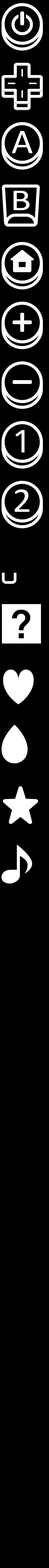
<style>
.page{position:relative;width:49px;height:1568px;background:#000000}
.page>*{position:absolute;margin:0}
.t1{font:34.9px "Calibri";color:#ffffff;scale:1.06 1}
.t2{font:30.6px "Calibri";color:#ffffff;scale:1.25 1}
.t3{font:31.3px "DroidSansMono";color:#ffffff;scale:1.12 1}
</style>
<div class="page">
<p class="t1" style="left:12px;top:131px;width:21px;height:23px">A</p>
<p class="t2" style="left:13px;top:191px;width:16px;height:19px">B</p>
<p class="t3" style="left:15px;top:430px;width:9px;height:22px">1</p>
<p class="t1" style="left:15px;top:489px;width:14px;height:23px">2</p>
</div>
